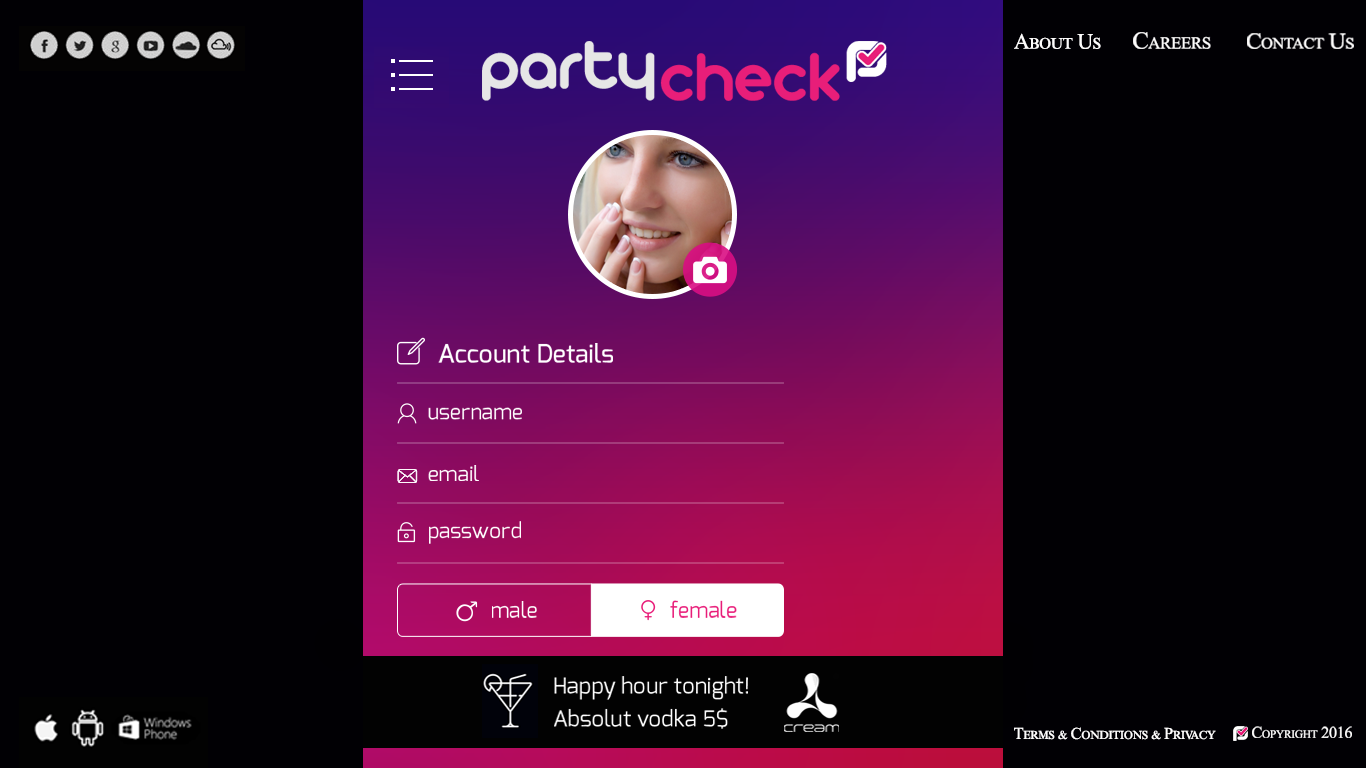
<style>
.page{position:relative;width:1366px;height:768px;background:#010004}
.page>*{position:absolute;margin:0}
.t1{font:21.9px "TimesNewRomanPSMT";letter-spacing:-0.025em;color:#fdfcfc;font-variant:small-caps}
.t2{font:24.3px "TimesNewRomanPSMT";letter-spacing:-0.025em;color:#fdfcfc;font-variant:small-caps}
.t3{font:22.2px "TimesNewRomanPSMT";letter-spacing:-0.025em;color:#fdfcfc;font-variant:small-caps;scale:1.05 1}
.t4{font:25.4px "Exo-Medium";color:#ffffff}
.t5{font:21.4px "Exo-Regular";color:#ffffff}
.t6{font:21.4px "Exo-Regular";color:#e81d79}
.t7{font:22.4px/32.9px "Exo-Regular";color:#ffffff}
.t8{font:16.3px "TimesNewRomanPSMT";letter-spacing:-0.025em;color:#fdfcfc;font-variant:small-caps}
.t9{font:16.5px "TimesNewRomanPSMT";letter-spacing:-0.025em;color:#fdfcfc;font-variant:small-caps}
</style>
<div class="page">
<p class="t1" style="left:1014px;top:33px;width:87px;height:16px">About Us</p>
<p class="t2" style="left:1133px;top:32px;width:78px;height:17px">Careers</p>
<p class="t3" style="left:1247px;top:33px;width:107px;height:16px">Contact Us</p>
<p class="t4" style="left:438px;top:343px;width:175px;height:20px">Account Details</p>
<p class="t5" style="left:428px;top:407px;width:94px;height:13px">username</p>
<p class="t5" style="left:428px;top:465px;width:51px;height:16px">email</p>
<p class="t5" style="left:429px;top:521px;width:92px;height:23px">password</p>
<p class="t5" style="left:492px;top:601px;width:45px;height:17px">male</p>
<p class="t6" style="left:670px;top:600px;width:67px;height:18px">female</p>
<p class="t7" style="left:554px;top:676px;width:194px;height:53px">Happy hour tonight!<br>Absolut vodka 5$</p>
<p class="t8" style="left:1252px;top:726px;width:100px;height:12px">Copyright 2016</p>
<p class="t9" style="left:1014px;top:727px;width:202px;height:13px">Terms &amp; Conditions &amp; Privacy</p>
</div>
